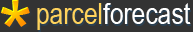
<style>
.page{position:relative;width:193px;height:32px;background:#333333}
.page>*{position:absolute;margin:0}
.t1{font:30px "ArialNarrow";color:#ffffff}
.t2{font:30px "ArialNarrow";color:#ffd35c}
</style>
<div class="page">
<p class="t1" style="left:37px;top:3px;width:154px;height:27px"><span class="t2">parcel</span>forecast</p>
</div>
